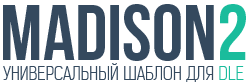
<style>
.page{position:relative;width:248px;height:82px;background:#ffffff}
.page>*{position:absolute;margin:0}
.t1{font:79px "BebasNeue";color:#34495e;text-transform:uppercase}
.t2{font:79px "BebasNeue";color:#1abc9c;text-transform:uppercase}
.t3{font:17.5px "KelsonSans-LightRU";color:#34495e;text-transform:uppercase}
.t4{font:17.5px "KelsonSans-LightRU";color:#1abc9c;text-transform:uppercase}
</style>
<div class="page">
<p class="t1" style="left:3px;top:4px;width:243px;height:57px">MADISON<span class="t2">2</span></p>
<p class="t3" style="left:3px;top:63px;width:241px;height:19px">УНИВЕРСАЛЬНЫЙ ШАБЛОН ДЛЯ<span class="t4"> DLE</span></p>
</div>
